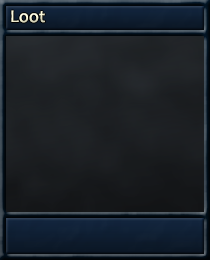
<style>
.page{position:relative;width:210px;height:260px}
.page>*{position:absolute;margin:0}
.t1{font:18px "Candara";color:#fefcdd}
</style>
<div class="page">
<p class="t1" style="left:11px;top:10px;width:34px;height:13px">Loot</p>
</div>
